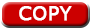
<style>
.page{position:relative;width:90px;height:28px;background:#cc0000}
.page>*{position:absolute;margin:0}
.t1{font:19px "Verdana";color:#ffffff;font-weight:bold}
</style>
<div class="page">
<p class="t1" style="left:19px;top:6px;width:53px;height:15px">COPY</p>
</div>
